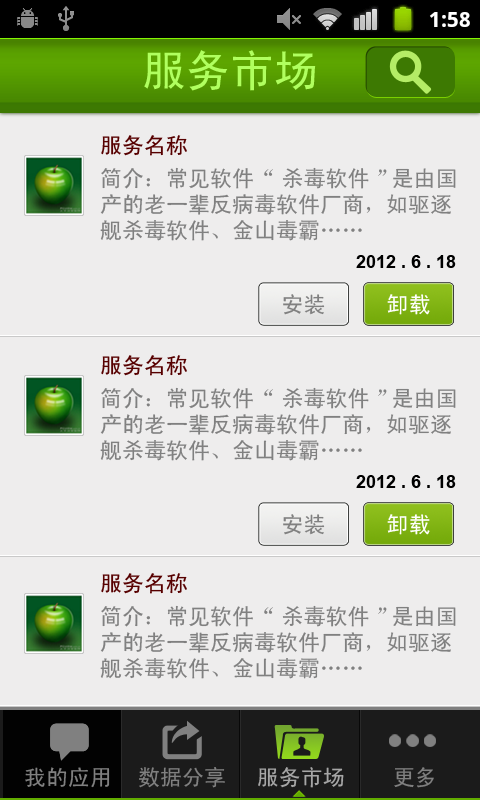
<style>
.page{position:relative;width:480px;height:800px;background:#eeeded}
.page>*{position:absolute;margin:0}
.t1{font:44px "SimHei";color:#b0ff5f}
.t2{font:22px "SimHei";color:#570000}
.t3{font:22px/26px "SimHei";color:#808080}
.t4{font:18px "Arial-BoldMT";color:#000000}
.t5{font:22px "SimHei";color:#808080}
.t6{font:22px "SimHei";color:#ffffff}
.t7{font:22px "SimHei";color:#a6a6a6}
</style>
<div class="page">
<p class="t1" style="left:144px;top:50px;width:172px;height:41px">服务市场</p>
<p class="t2" style="left:101px;top:135px;width:86px;height:21px">服务名称</p>
<p class="t3" style="left:100px;top:167px;width:356px;height:74px">简介：常见软件 “杀毒软件”是由国<br>产的老一辈反病毒软件厂商，如驱逐<br>舰杀毒软件、金山毒霸……</p>
<p class="t4" style="left:356px;top:255px;width:100px;height:13px">2012 . 6 . 18</p>
<p class="t5" style="left:283px;top:294px;width:42px;height:21px">安装</p>
<p class="t6" style="left:387px;top:294px;width:43px;height:21px">卸载</p>
<p class="t2" style="left:101px;top:355px;width:86px;height:21px">服务名称</p>
<p class="t3" style="left:100px;top:387px;width:356px;height:74px">简介：常见软件 “杀毒软件”是由国<br>产的老一辈反病毒软件厂商，如驱逐<br>舰杀毒软件、金山毒霸……</p>
<p class="t4" style="left:356px;top:475px;width:100px;height:13px">2012 . 6 . 18</p>
<p class="t5" style="left:283px;top:514px;width:42px;height:21px">安装</p>
<p class="t6" style="left:387px;top:514px;width:43px;height:21px">卸载</p>
<p class="t2" style="left:101px;top:573px;width:86px;height:21px">服务名称</p>
<p class="t3" style="left:100px;top:605px;width:356px;height:74px">简介：常见软件 “杀毒软件”是由国<br>产的老一辈反病毒软件厂商，如驱逐<br>舰杀毒软件、金山毒霸……</p>
<p class="t5" style="left:25px;top:767px;width:85px;height:21px">我的应用</p>
<p class="t5" style="left:139px;top:767px;width:86px;height:21px">数据分享</p>
<p class="t7" style="left:258px;top:767px;width:86px;height:21px">服务市场</p>
<p class="t5" style="left:394px;top:767px;width:40px;height:21px">更多</p>
</div>
